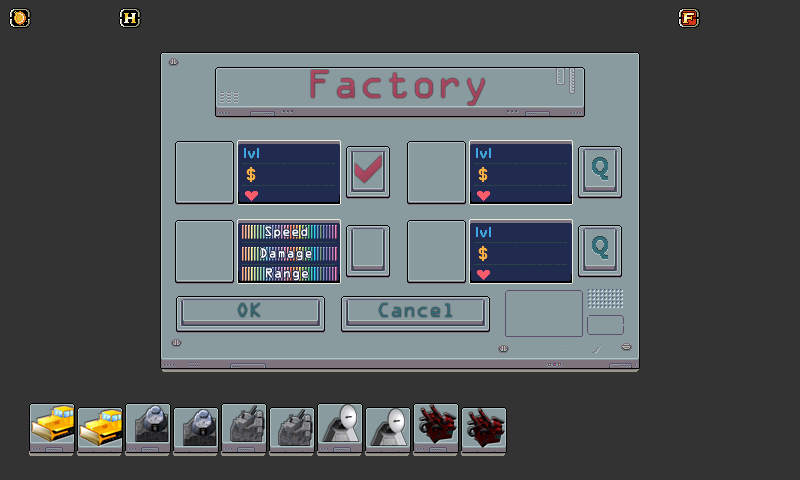
<style>
.page{position:relative;width:800px;height:480px;background:#333333}
.page>*{position:absolute;margin:0}
.t1{font:36px "OCRAStd";color:#ab4962}
.t2{font:12px "OCRAStd";color:#ffffff}
.t3{font:18px "OCRAStd";color:#356d79}
</style>
<div class="page">
<p class="t1" style="left:311px;top:70px;width:174px;height:36px">Factory</p>
<p class="t2" style="left:265px;top:226px;width:43px;height:13px">Speed</p>
<p class="t2" style="left:260px;top:248px;width:52px;height:13px">Damage</p>
<p class="t2" style="left:266px;top:268px;width:42px;height:13px">Range</p>
<p class="t3" style="left:238px;top:303px;width:22px;height:14px">OK</p>
<p class="t3" style="left:379px;top:303px;width:73px;height:14px">Cancel</p>
</div>
